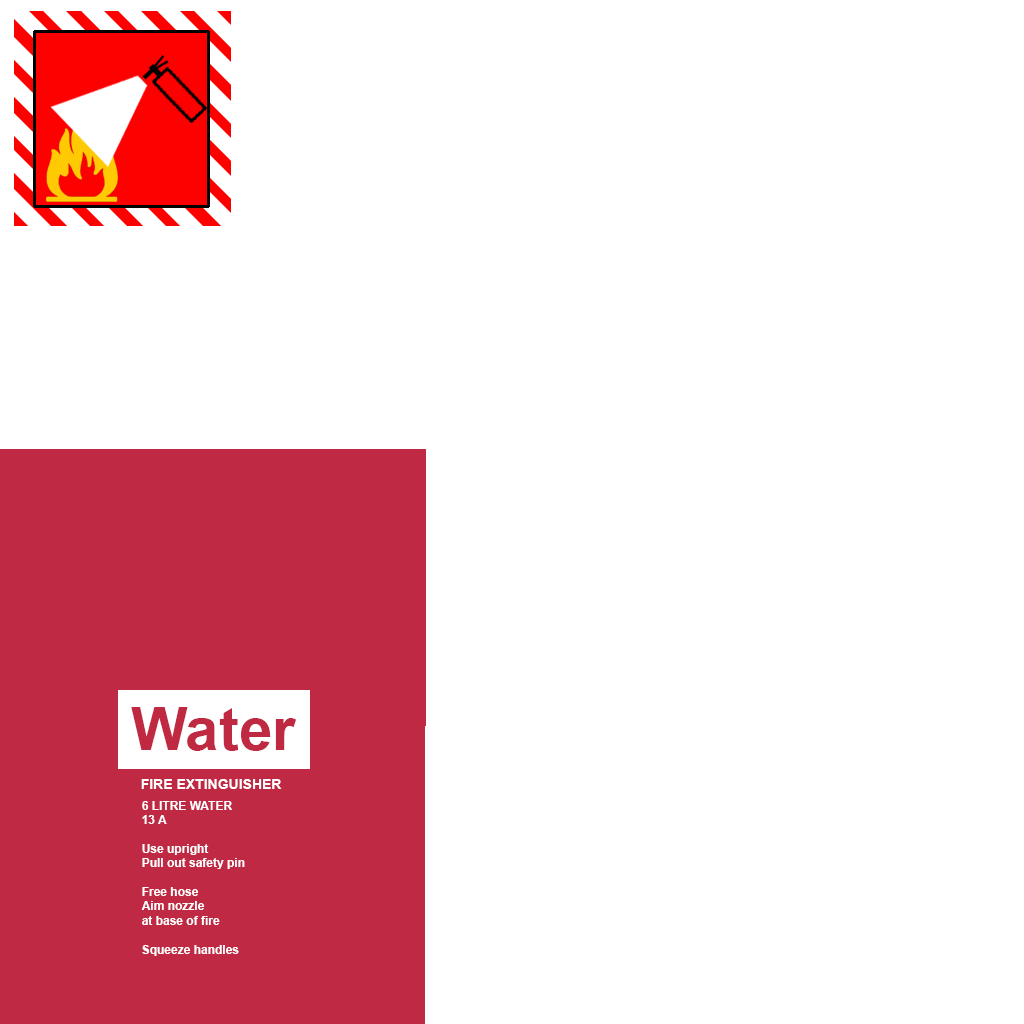
<style>
.page{position:relative;width:1024px;height:1024px;background:#ffffff}
.page>*{position:absolute;margin:0}
.t1{font:60px "Arial-BoldMT";color:#c02942}
.t2{font:14px "Arial-BoldMT";color:#ffffff}
.t3{font:12px "Arial-BoldMT";color:#ffffff}
</style>
<div class="page">
<p class="t1" style="left:131px;top:707px;width:165px;height:44px">Water</p>
<p class="t2" style="left:141px;top:779px;width:141px;height:10px">FIRE EXTINGUISHER</p>
<p class="t3" style="left:141px;top:801px;width:104px;height:155px">6 LITRE WATER<br>13 A<br><br>Use upright<br>Pull out safety pin<br><br>Free hose<br>Aim nozzle<br>at base of fire<br><br>Squeeze handles</p>
</div>
